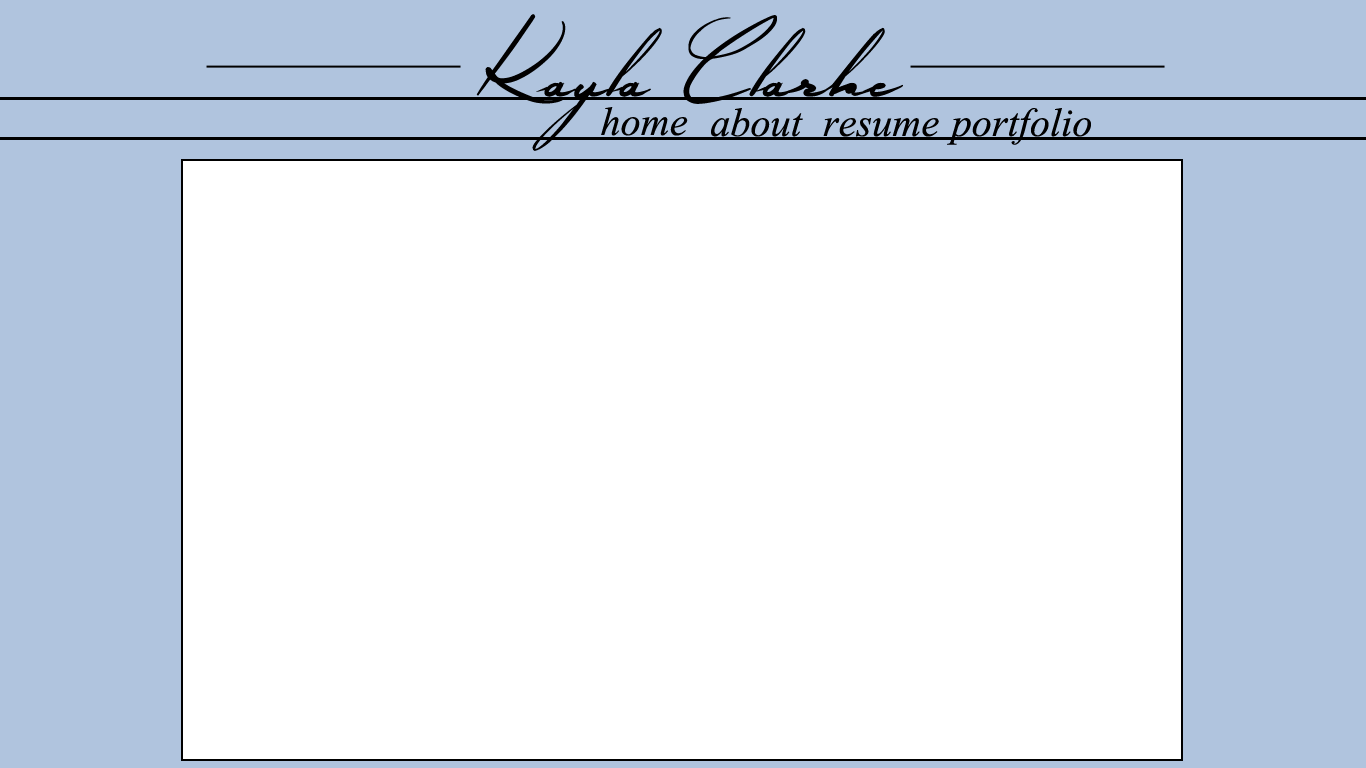
<style>
.page{position:relative;width:1366px;height:768px;background:#ffffff}
.page>*{position:absolute;margin:0}
.t1{font:200px "AngeliquemadouceColombe";color:#010000}
.t2{font:50px "Vijaya";color:#010000}
</style>
<div class="page">
<p class="t1" style="left:476px;top:14px;width:427px;height:137px">Kayla Clarke</p>
<p class="t2" style="left:601px;top:107px;width:87px;height:29px">home</p>
<p class="t2" style="left:711px;top:108px;width:92px;height:29px">about</p>
<p class="t2" style="left:947px;top:108px;width:144px;height:37px">portfolio</p>
<p class="t2" style="left:823px;top:118px;width:116px;height:19px">resume</p>
</div>
